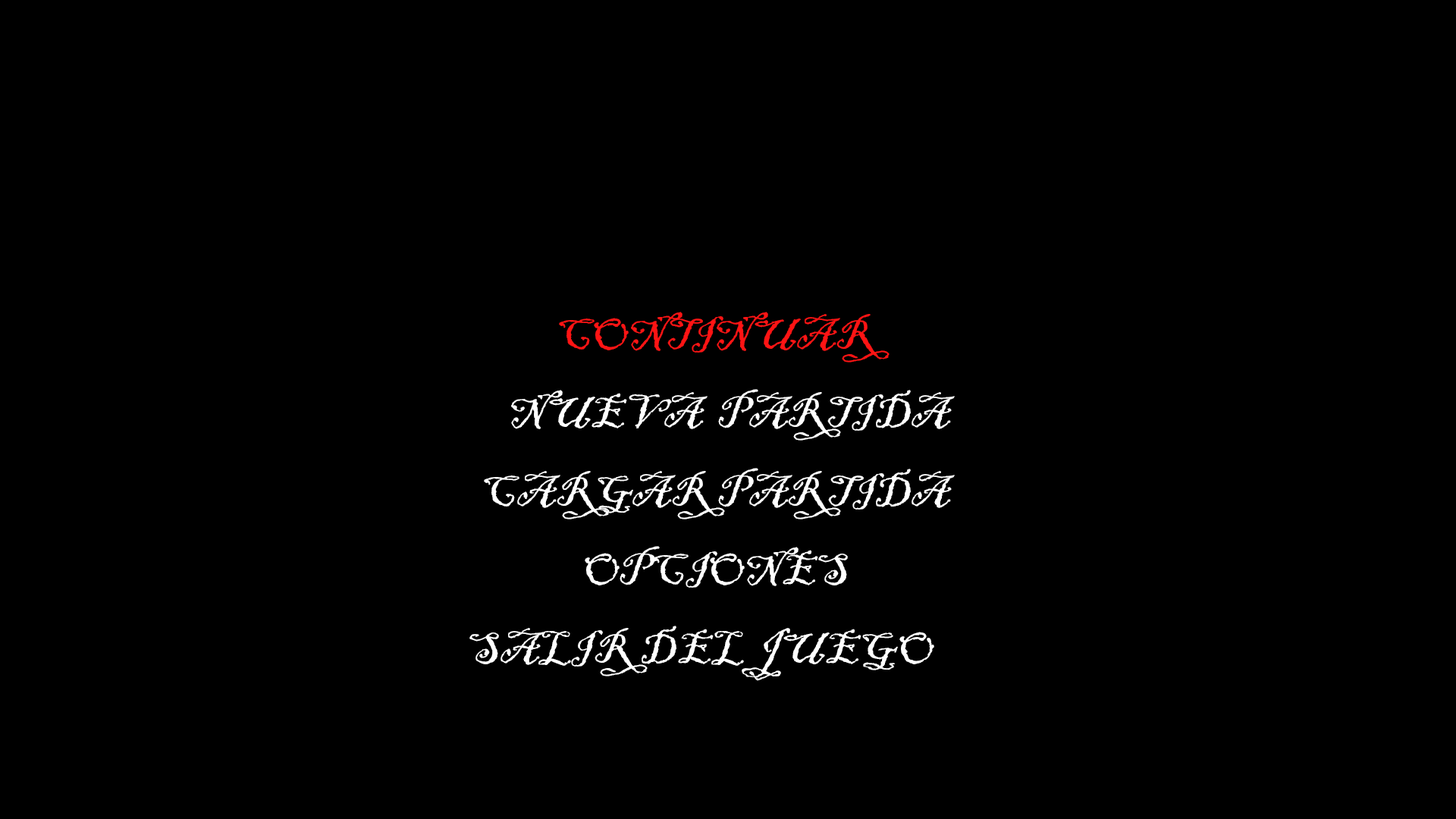
<style>
.page{position:relative;width:1456px;height:819px;background:#000000}
.page>*{position:absolute;margin:0}
.t1{font:45.5px "BlackadderITC-Regular";color:#ff1414}
.t2{font:45.5px "BlackadderITC-Regular";color:#ffffff}
</style>
<div class="page">
<p class="t1" style="left:559px;top:312px;width:331px;height:50px">CONTINUAR</p>
<p class="t2" style="left:511px;top:389px;width:444px;height:52px">NUEVA  PARTIDA</p>
<p class="t2" style="left:484px;top:468px;width:471px;height:51px">CARGAR PARTIDA</p>
<p class="t2" style="left:585px;top:546px;width:263px;height:42px">OPCIONES</p>
<p class="t2" style="left:469px;top:626px;width:465px;height:55px">SALIR DEL JUEGO</p>
</div>
